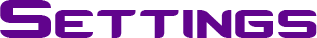
<style>
.page{position:relative;width:317px;height:38px;background:#ffffff}
.page>*{position:absolute;margin:0}
.t1{font:75px "Counter-StrikeRegular";color:#61048d}
</style>
<div class="page">
<p class="t1" style="left:0px;top:0px;width:317px;height:38px">Settings</p>
</div>
